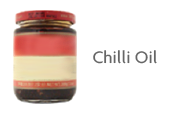
<style>
.page{position:relative;width:171px;height:113px;background:#ffffff}
.page>*{position:absolute;margin:0}
.t1{font:18px "Agenda-Medium";color:#666666}
</style>
<div class="page">
<p class="t1" style="left:93px;top:50px;width:64px;height:14px">Chilli Oil</p>
</div>
